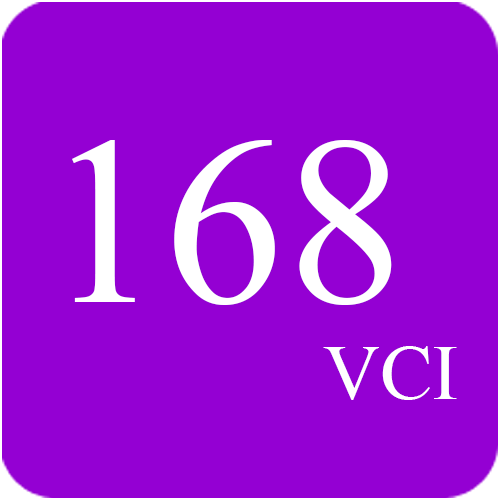
<style>
.page{position:relative;width:500px;height:500px;background:#9400d3}
.page>*{position:absolute;margin:0}
.t1{font:240.4px "TimesNewRomanPSMT";color:#ffffff}
.t2{font:78.7px "TimesNewRomanPSMT";color:#ffffff}
</style>
<div class="page">
<p class="t1" style="left:72px;top:140px;width:320px;height:165px">168</p>
<p class="t2" style="left:323px;top:346px;width:134px;height:54px">VCI</p>
</div>
